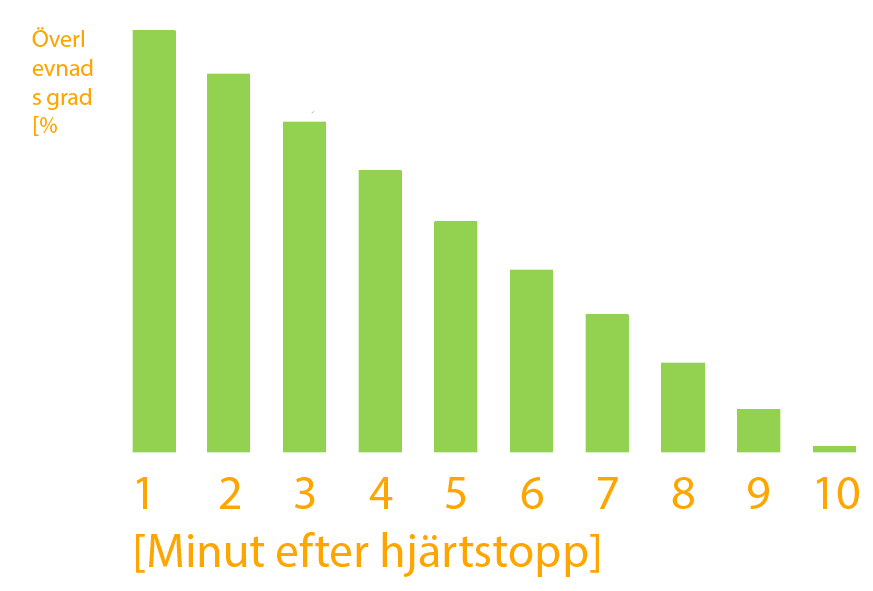
<style>
.page{position:relative;width:873px;height:591px;background:#ffffff}
.page>*{position:absolute;margin:0}
.t1{font:24px "MyriadPro-Regular";color:#ffa500}
.t2{font:48px "MyriadPro-Regular";color:#ffa500}
</style>
<div class="page">
<p class="t1" style="left:32px;top:27px;width:61px;height:109px">Överl evnads grad [%</p>
<p class="t2" style="left:136px;top:477px;width:723px;height:100px">1      2     3     4     5     6     7     8     9    10<br>[Minut efter hjärtstopp]</p>
</div>
